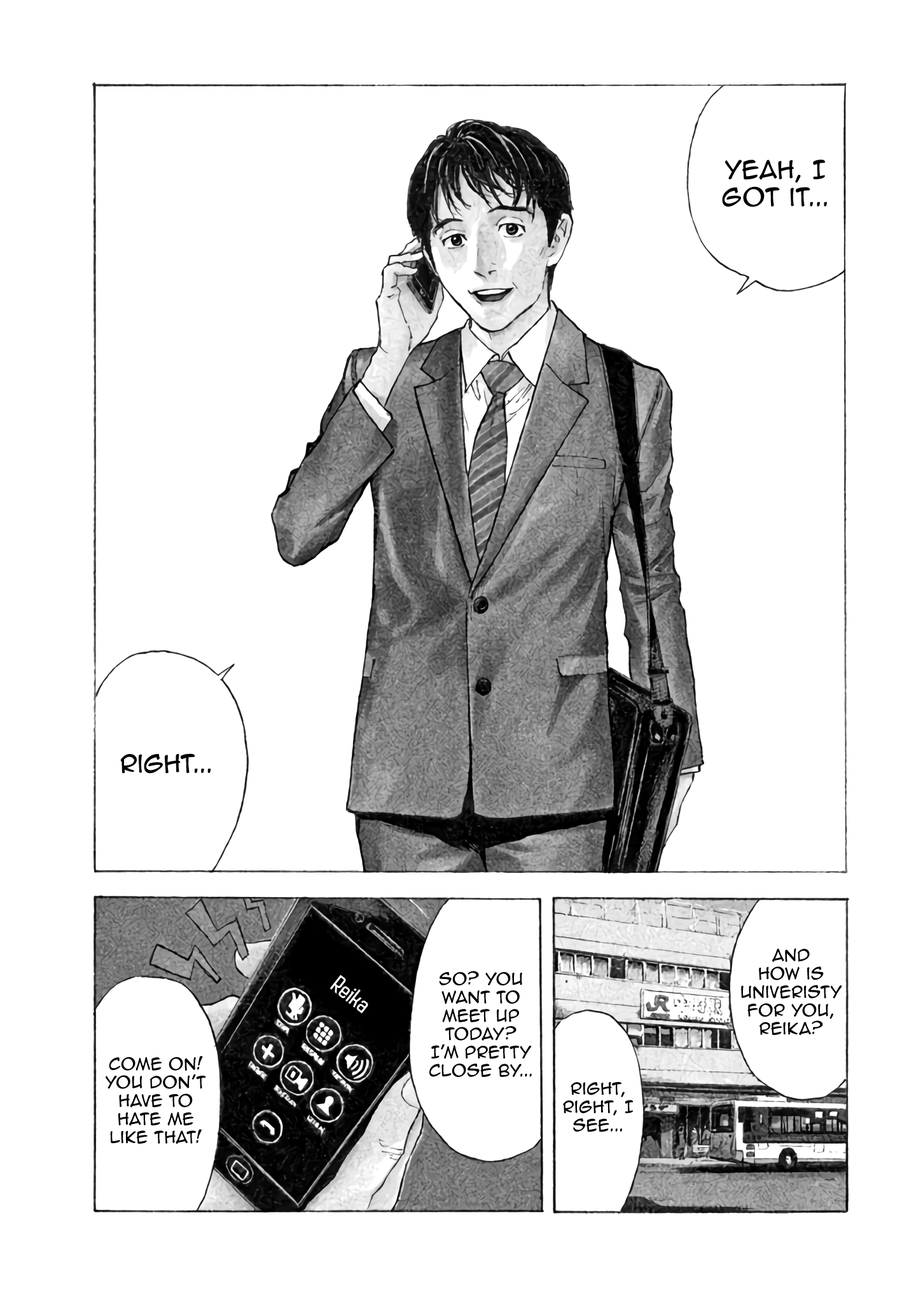
<style>
.page{position:relative;width:916px;height:1302px;background:#ffffff}
.page>*{position:absolute;margin:0}
.t1{font:22.9px "AnimeAce2.0BB";color:#000000}
.t2{font:15.3px "AnimeAce2.0BB";color:#000000}
.t3{font:22.9px "AutobusBold";color:#ffffff}
</style>
<div class="page">
<p class="t1" style="left:722px;top:160px;width:105px;height:47px;text-align:center">Yeah, I got it...</p>
<p class="t1" style="left:120px;top:754px;width:91px;height:20px">Right...</p>
<p class="t2" style="left:741px;top:949px;width:101px;height:87px;text-align:center">and how is univeristy for you, reika?</p>
<p class="t3" style="left:329px;top:975px;width:39px;height:39px;rotate:38deg">Reika</p>
<p class="t2" style="left:429px;top:971px;width:103px;height:106px;text-align:center">so? you want to meet up today? I’m pretty close by...</p>
<p class="t2" style="left:106px;top:1056px;width:100px;height:89px;text-align:center">Come on! you don’t have to hate me like that!</p>
<p class="t2" style="left:563px;top:1082px;width:70px;height:50px;text-align:center">Right, right, I see...</p>
</div>
